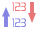
<style>
.page{position:relative;width:41px;height:30px;background:#ffffff}
.page>*{position:absolute;margin:0}
.t1{font:12px "AeroMaticsDisplayLightRegular";color:#f17878;text-transform:uppercase;scale:0.96 1}
.t2{font:12px "AeroMaticsDisplayLightRegular";color:#8585e4;text-transform:uppercase;scale:0.96 1}
</style>
<div class="page">
<p class="t1" style="left:12px;top:2px;width:14px;height:9px">123</p>
<p class="t2" style="left:12px;top:18px;width:14px;height:9px">123</p>
</div>
